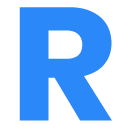
<style>
.page{position:relative;width:128px;height:128px;background:#ffffff}
.page>*{position:absolute;margin:0}
.t1{font:160px "Poppins-Bold";letter-spacing:-0.05em;color:#2b88f9;scale:1.04 1}
</style>
<div class="page">
<p class="t1" style="left:19px;top:7px;width:93px;height:114px">R</p>
</div>
